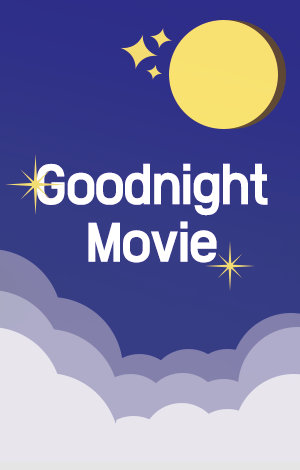
<style>
.page{position:relative;width:300px;height:470px}
.page>*{position:absolute;margin:0}
.t1{font:48px "Cafe24Ohsquare";color:#ffffff;scale:0.9 1}
</style>
<div class="page">
<p class="t1" style="left:37px;top:163px;width:231px;height:100px;text-align:center">Goodnight<br>Movie</p>
</div>
